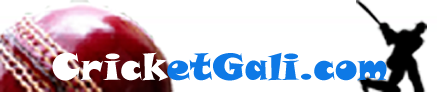
<style>
.page{position:relative;width:437px;height:92px;background:#ffffff}
.page>*{position:absolute;margin:0}
.t1{font:36.8px "SnapITC-Regular";color:#0e79e6}
.t2{font:36.8px "SnapITC-Regular";color:#ffffff}
</style>
<div class="page">
<p class="t1" style="left:52px;top:52px;width:335px;height:29px"><span class="t2">Crick</span>etGali.com</p>
</div>
